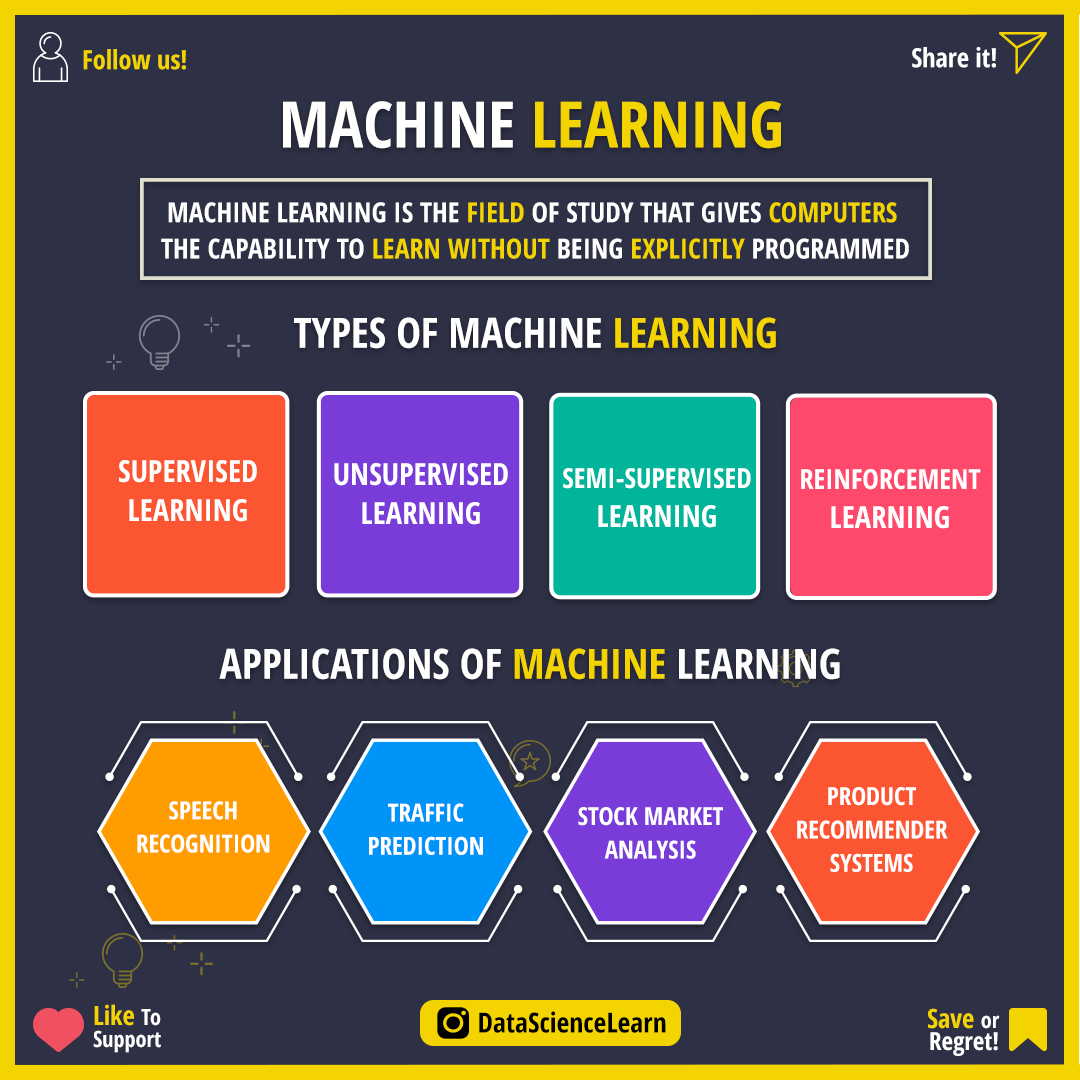
<style>
.page{position:relative;width:1080px;height:1080px;background:#2e3045}
.page>*{position:absolute;margin:0}
.t1{font:26.4px "OpenSans-CondensedBold";color:#f3d400}
.t2{font:26.4px "OpenSans-CondensedBold";color:#ffffff}
.t3{font:63.9px "OpenSans-CondensedBold";color:#f3d400}
.t4{font:63.9px "OpenSans-CondensedBold";color:#fffffe}
.t5{font:27.8px/36.1px "OpenSans-CondensedBold";color:#ffffff}
.t6{font:27.8px/36.1px "OpenSans-CondensedBold";color:#f3d400}
.t7{font:41.7px "OpenSans-CondensedBold";color:#ffffff}
.t8{font:41.7px "OpenSans-CondensedBold";color:#f3d400}
.t9{font:30.6px/38.9px "OpenSans-CondensedBold";color:#ffffff}
.t10{font:27.8px/38.9px "OpenSans-CondensedBold";color:#ffffff}
.t11{font:41.7px "OpenSans-CondensedBold";color:#fefefe}
.t12{font:25px/33.3px "OpenSans-CondensedBold";color:#ffffff}
.t13{font:22.2px/22.2px "OpenSans-CondensedBold";color:#ffffff}
.t14{font:26.4px/22.2px "OpenSans-CondensedBold";color:#f3d400}
.t15{font:27.8px "OpenSans-CondensedBold";color:#000000}
.t16{font:25px/22.2px "OpenSans-CondensedBold";color:#ffffff}
</style>
<div class="page">
<p class="t1" style="left:83px;top:49px;width:103px;height:21px">Follow us!</p>
<p class="t2" style="left:912px;top:47px;width:84px;height:21px">Share it!</p>
<p class="t3" style="left:283px;top:101px;width:498px;height:48px"><span class="t4">MACHINE </span>LEARNING</p>
<p class="t5" style="left:161px;top:202px;width:748px;height:57px;text-align:center">MACHINE LEARNING IS THE <span class="t6">FIELD </span>OF STUDY THAT GIVES <span class="t6">COMPUTERS <br></span>THE CAPABILITY TO <span class="t6">LEARN WITHOUT </span>BEING <span class="t6">EXPLICITLY </span>PROGRAMMED</p>
<p class="t7" style="left:294px;top:317px;width:482px;height:32px">TYPES OF MACHINE <span class="t8">LEARNING</span></p>
<p class="t9" style="left:119px;top:460px;width:138px;height:62px;text-align:center">SUPERVISED<br>LEARNING</p>
<p class="t9" style="left:334px;top:463px;width:174px;height:62px;text-align:center">UNSUPERVISED<br>LEARNING</p>
<p class="t10" style="left:563px;top:468px;width:188px;height:60px;text-align:center">SEMI-SUPERVISED<br><span class="t9">LEARNING</span></p>
<p class="t10" style="left:801px;top:469px;width:180px;height:60px;text-align:center">REINFORCEMENT<br><span class="t9">LEARNING</span></p>
<p class="t7" style="left:219px;top:648px;width:621px;height:32px">APPLICATIONS OF <span class="t8">MACHINE </span><span class="t11">LEARNING</span></p>
<p class="t12" style="left:797px;top:787px;width:151px;height:85px;text-align:center">PRODUCT<br>RECOMMENDER<br>SYSTEMS</p>
<p class="t12" style="left:137px;top:801px;width:133px;height:52px;text-align:center">SPEECH<br>RECOGNITION</p>
<p class="t12" style="left:369px;top:803px;width:114px;height:52px;text-align:center">TRAFFIC<br>PREDICTION</p>
<p class="t12" style="left:578px;top:807px;width:145px;height:52px;text-align:center">STOCK MARKET<br>ANALYSIS</p>
<p class="t13" style="left:93px;top:1004px;width:68px;height:49px"><span class="t14">Like </span>To<br>Support</p>
<p class="t15" style="left:479px;top:1011px;width:187px;height:22px">DataScienceLearn</p>
<p class="t16" style="left:928px;top:1008px;width:72px;height:48px;text-align:right"><span class="t14">Save </span><span class="t13">or<br></span>Regret!</p>
</div>
